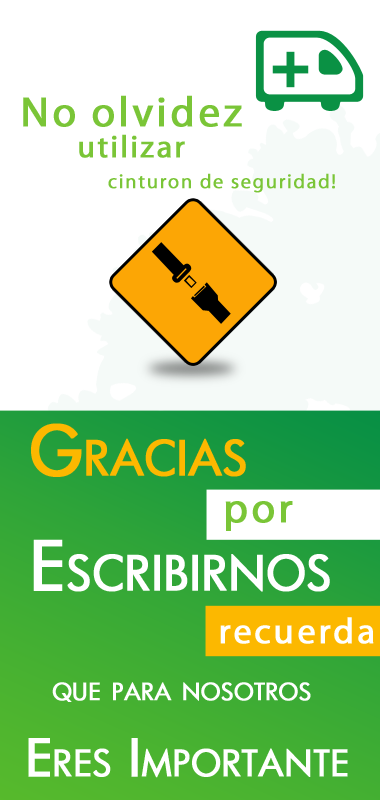
<style>
.page{position:relative;width:380px;height:800px;background:#ffffff}
.page>*{position:absolute;margin:0}
.t1{font:20.2px/31.2px "MyriadPro-Regular";letter-spacing:0.06em;color:#7ac537;font-weight:bold}
.t2{font:42.5px/31.2px "MyriadPro-Regular";letter-spacing:0.06em;color:#7ac537;font-weight:bold}
.t3{font:31.3px/31.2px "MyriadPro-Regular";letter-spacing:0.06em;color:#7ac537;font-weight:bold}
.t4{font:66.7px/115.3px "Futura-Medium";color:#ffffff;font-variant:small-caps;font-weight:bold}
.t5{font:66.7px "Futura-Medium";color:#fcb800;font-variant:small-caps;font-weight:bold}
.t6{font:42.5px "MyriadPro-Regular";letter-spacing:0.06em;color:#7ac537;font-weight:bold}
.t7{font:36.4px "MyriadPro-Regular";letter-spacing:0.06em;color:#ffffff;font-weight:bold}
.t8{font:33.4px "Futura-Medium";color:#ffffff;font-variant:small-caps;font-weight:bold}
.t9{font:50.6px "Futura-Medium";color:#ffffff;font-variant:small-caps;font-weight:bold}
</style>
<div class="page">
<p class="t1" style="left:23px;top:95px;width:312px;height:98px;text-align:center"><span class="t2">No olvidez<br></span><span class="t3">utilizar <br>     </span>cinturon de seguridad!</p>
<p class="t4" style="left:31px;top:423px;width:299px;height:169px"><span class="t5">Gracias<br></span>Escribirnos</p>
<p class="t6" style="left:225px;top:501px;width:68px;height:30px">por</p>
<p class="t7" style="left:220px;top:617px;width:154px;height:27px">recuerda</p>
<p class="t8" style="left:52px;top:682px;width:259px;height:20px">que para nosotros</p>
<p class="t9" style="left:28px;top:738px;width:320px;height:40px">Eres Importante</p>
</div>
